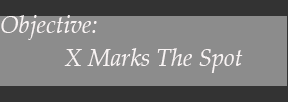
<style>
.page{position:relative;width:288px;height:102px;background:#8c8c8c}
.page>*{position:absolute;margin:0}
.t1{font:24px "Palatino-Italic";color:#f9f4f4}
</style>
<div class="page">
<p class="t1" style="left:1px;top:15px;width:96px;height:25px">Objective:</p>
<p class="t1" style="left:64px;top:48px;width:179px;height:25px">X Marks The Spot</p>
</div>
